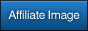
<style>
.page{position:relative;width:88px;height:31px}
.page>*{position:absolute;margin:0}
.t1{font:12px "HelveticaWorld-Regular";letter-spacing:-0.02em;color:#ffffff}
</style>
<div class="page">
<p class="t1" style="left:8px;top:10px;width:72px;height:12px">Affiliate Image</p>
</div>
